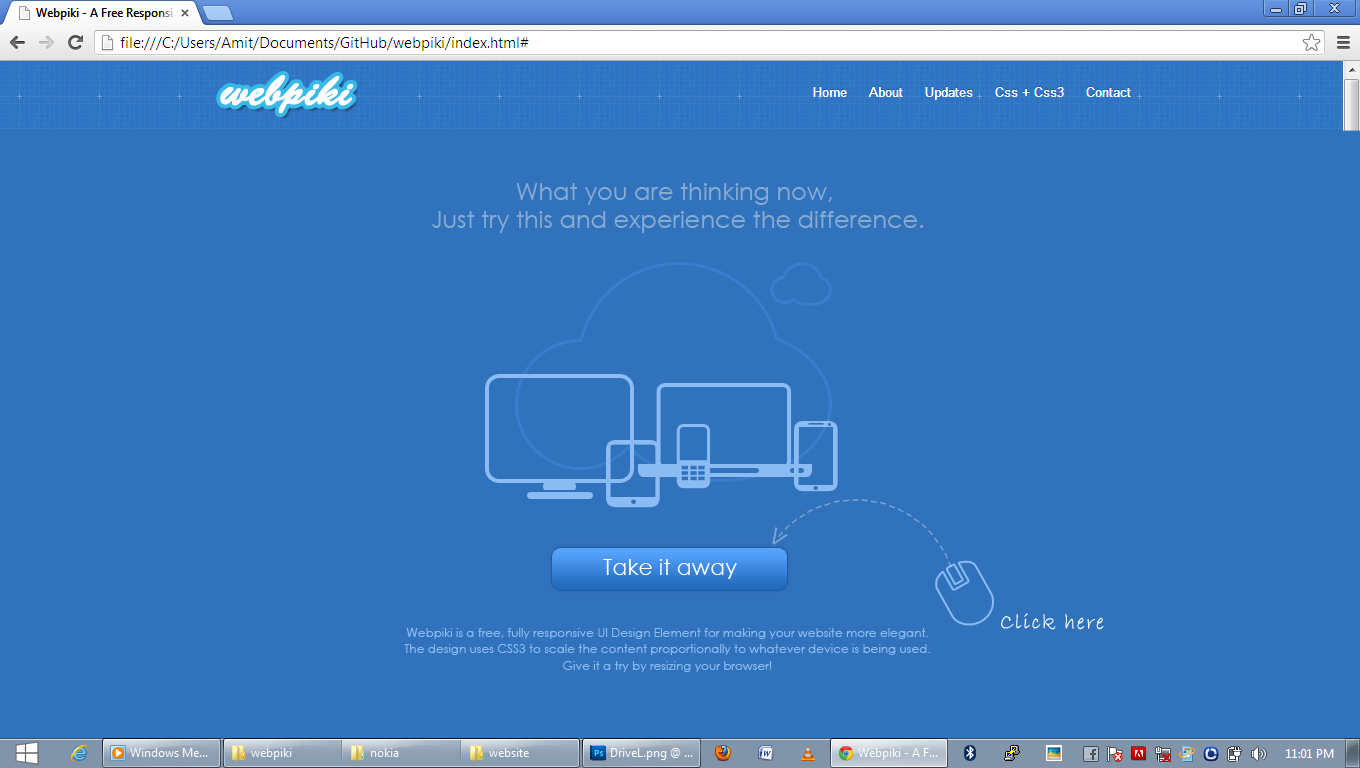
<style>
.page{position:relative;width:1360px;height:768px;background:#3172bc}
.page>*{position:absolute;margin:0}
.t1{font:24px/28.6px "CenturyGothic";color:#88abd2}
.t2{font:22px "CenturyGothic";letter-spacing:0.07em;color:#7da6d5}
.t3{font:30px "BellMTBold";letter-spacing:0.07em;color:#7da6d5}
.t4{font:22px "CenturyGothic";color:#ffffff}
.t5{font:22px "BradleyHandITC";letter-spacing:0.07em;color:#fefeff}
.t6{font:12px/16.6px "CenturyGothic";color:#8bbbf3}
</style>
<div class="page">
<p class="t1" style="left:432px;top:183px;width:492px;height:50px;text-align:center">What you are thinking now, <br>Just try this and experience the difference.</p>
<p class="t2" style="left:778px;top:499px;width:174px;height:69px;rotate:86deg">-----------------------</p>
<p class="t3" style="left:772px;top:527px;width:16px;height:18px;rotate:123deg">&gt;</p>
<p class="t4" style="left:603px;top:559px;width:134px;height:20px">Take it away</p>
<p class="t5" style="left:1001px;top:613px;width:103px;height:17px">Click here</p>
<p class="t6" style="left:404px;top:628px;width:526px;height:44px;text-align:center">Webpiki is a free, fully responsive UI Design Element for making your website more elegant. <br>The design uses CSS3 to scale the content proportionally to whatever device is being used. <br>Give it a try by resizing your browser!</p>
</div>
